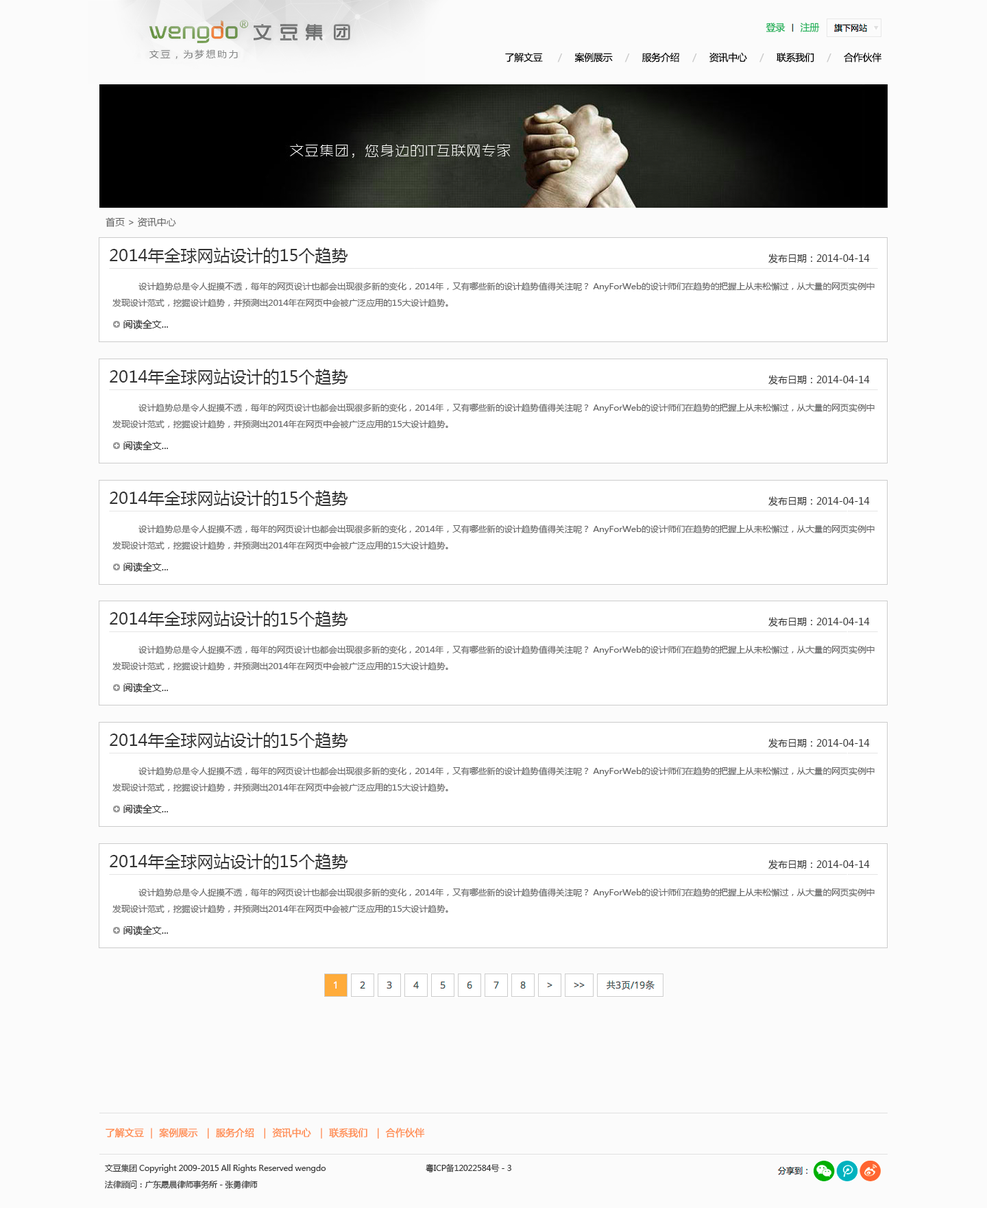
<style>
.page{position:relative;width:987px;height:1208px;background:#fbfbfb}
.page>*{position:absolute;margin:0}
.t1{font:9.6px "MicrosoftYaHei";letter-spacing:-0.025em;color:#23b35c}
.t2{font:9.6px "MicrosoftYaHei";letter-spacing:-0.025em;color:#010101}
.t3{font:9.6px "MicrosoftYaHei";letter-spacing:-0.025em;color:#cccccc}
.t4{font:9.6px "MicrosoftYaHei";color:#666666}
.t5{font:16.5px "MicrosoftYaHei";color:#333333}
.t6{font:9.6px "MicrosoftYaHei";color:#333333}
.t7{font:8.2px/16.5px "MicrosoftYaHei";color:#666666;scale:1.05 1}
.t8{font:9.6px "MicrosoftYaHei";letter-spacing:-0.025em;color:#ff8f54;font-weight:bold}
.t9{font:8.2px/16.5px "MicrosoftYaHei";letter-spacing:-0.025em;color:#333333}
</style>
<div class="page">
<p class="t1" style="left:766px;top:23px;width:20px;height:9px">登录</p>
<p class="t1" style="left:800px;top:23px;width:20px;height:9px">注册</p>
<p class="t2" style="left:505px;top:52px;width:377px;height:10px">了解文豆      <span class="t3">/     </span>案例展示     <span class="t3">/     </span>服务介绍     <span class="t3">/     </span>资讯中心     <span class="t3">/     </span>联系我们     <span class="t3">/     </span>合作伙伴</p>
<p class="t4" style="left:106px;top:217px;width:70px;height:10px">首页 &gt; 资讯中心</p>
<p class="t5" style="left:110px;top:247px;width:238px;height:17px">2014年全球网站设计的15个趋势</p>
<p class="t6" style="left:768px;top:254px;width:102px;height:9px">发布日期：2014-04-14</p>
<p class="t7" style="left:112px;top:282px;width:763px;height:25px">设计趋势总是令人捉摸不透，每年的网页设计也都会出现很多新的变化，2014年，又有哪些新的设计趋势值得关注呢？ AnyForWeb的设计师们在趋势的把握上从未松懈过，从大量的网页实例中发现设计范式，挖掘设计趋势，并预测出2014年在网页中会被广泛应用的15大设计趋势。</p>
<p class="t5" style="left:110px;top:369px;width:238px;height:16px">2014年全球网站设计的15个趋势</p>
<p class="t6" style="left:768px;top:375px;width:102px;height:10px">发布日期：2014-04-14</p>
<p class="t7" style="left:112px;top:403px;width:763px;height:25px">设计趋势总是令人捉摸不透，每年的网页设计也都会出现很多新的变化，2014年，又有哪些新的设计趋势值得关注呢？ AnyForWeb的设计师们在趋势的把握上从未松懈过，从大量的网页实例中发现设计范式，挖掘设计趋势，并预测出2014年在网页中会被广泛应用的15大设计趋势。</p>
<p class="t5" style="left:110px;top:490px;width:238px;height:17px">2014年全球网站设计的15个趋势</p>
<p class="t6" style="left:768px;top:496px;width:102px;height:10px">发布日期：2014-04-14</p>
<p class="t7" style="left:112px;top:524px;width:763px;height:26px">设计趋势总是令人捉摸不透，每年的网页设计也都会出现很多新的变化，2014年，又有哪些新的设计趋势值得关注呢？ AnyForWeb的设计师们在趋势的把握上从未松懈过，从大量的网页实例中发现设计范式，挖掘设计趋势，并预测出2014年在网页中会被广泛应用的15大设计趋势。</p>
<p class="t5" style="left:110px;top:611px;width:238px;height:16px">2014年全球网站设计的15个趋势</p>
<p class="t6" style="left:768px;top:617px;width:102px;height:10px">发布日期：2014-04-14</p>
<p class="t7" style="left:112px;top:645px;width:763px;height:25px">设计趋势总是令人捉摸不透，每年的网页设计也都会出现很多新的变化，2014年，又有哪些新的设计趋势值得关注呢？ AnyForWeb的设计师们在趋势的把握上从未松懈过，从大量的网页实例中发现设计范式，挖掘设计趋势，并预测出2014年在网页中会被广泛应用的15大设计趋势。</p>
<p class="t5" style="left:110px;top:732px;width:238px;height:17px">2014年全球网站设计的15个趋势</p>
<p class="t6" style="left:768px;top:738px;width:102px;height:10px">发布日期：2014-04-14</p>
<p class="t7" style="left:112px;top:766px;width:763px;height:26px">设计趋势总是令人捉摸不透，每年的网页设计也都会出现很多新的变化，2014年，又有哪些新的设计趋势值得关注呢？ AnyForWeb的设计师们在趋势的把握上从未松懈过，从大量的网页实例中发现设计范式，挖掘设计趋势，并预测出2014年在网页中会被广泛应用的15大设计趋势。</p>
<p class="t5" style="left:110px;top:853px;width:238px;height:17px">2014年全球网站设计的15个趋势</p>
<p class="t6" style="left:768px;top:860px;width:102px;height:9px">发布日期：2014-04-14</p>
<p class="t7" style="left:112px;top:888px;width:763px;height:25px">设计趋势总是令人捉摸不透，每年的网页设计也都会出现很多新的变化，2014年，又有哪些新的设计趋势值得关注呢？ AnyForWeb的设计师们在趋势的把握上从未松懈过，从大量的网页实例中发现设计范式，挖掘设计趋势，并预测出2014年在网页中会被广泛应用的15大设计趋势。</p>
<p class="t8" style="left:106px;top:1128px;width:319px;height:11px">了解文豆 ｜ 案例展示  ｜ 服务介绍  ｜ 资讯中心  ｜ 联系我们  ｜ 合作伙伴</p>
<p class="t9" style="left:105px;top:1163px;width:406px;height:26px">文豆集团 Copyright 2009-2015 All Rights Reserved wengdo     粤ICP备12022584号－3<br>法律顾问：广东晟晨律师事务所－张勇律师</p>
</div>
